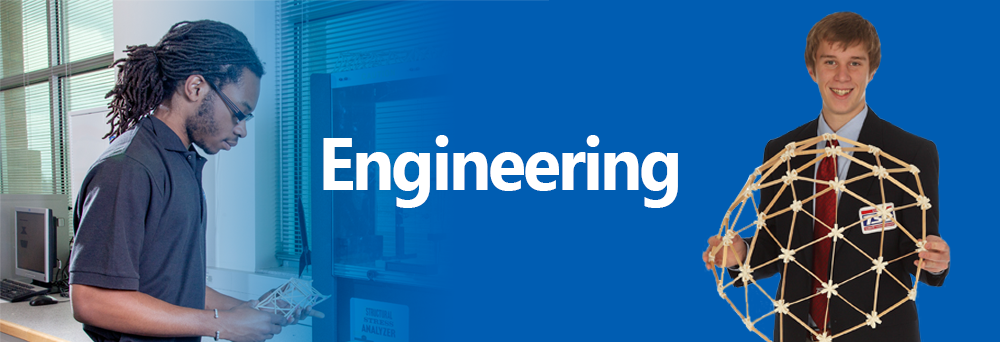
<style>
.page{position:relative;width:1000px;height:342px;background:#005db2}
.page>*{position:absolute;margin:0}
.t1{font:73.9px "MyanmarText-Bold";letter-spacing:-0.04em;color:#ffffff;scale:0.94 1}
</style>
<div class="page">
<p class="t1" style="left:323px;top:135px;width:355px;height:73px">Engineering</p>
</div>
